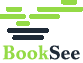
<style>
.page{position:relative;width:83px;height:63px;background:#ffffff}
.page>*{position:absolute;margin:0}
.t1{font:20.6px "BellMTBold";color:#94da46}
.t2{font:20.6px "BellMTBold";color:#1f2a37}
</style>
<div class="page">
<p class="t1" style="left:2px;top:45px;width:78px;height:15px">Book<span class="t2">See</span></p>
</div>
